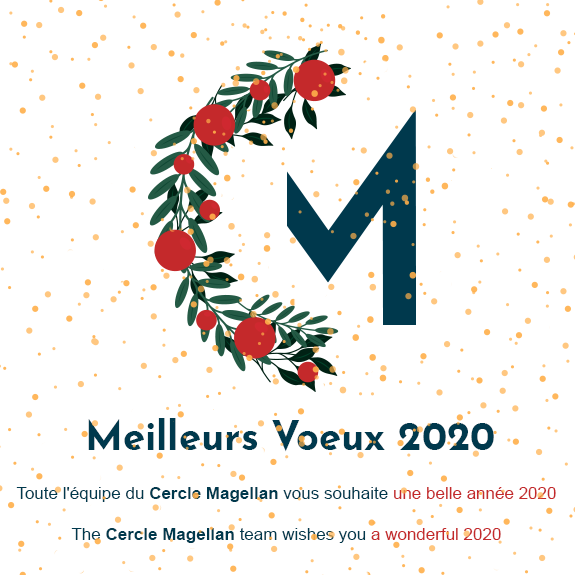
<style>
.page{position:relative;width:575px;height:575px;background:#ffffff}
.page>*{position:absolute;margin:0}
.t1{font:40px "JosefinSans-Bold";color:#00394d}
.t2{font:17px "ArialMT";color:#c4292b}
.t3{font:17px "ArialMT";color:#00394d}
.t4{font:17px "Arial-BoldMT";color:#00394d}
</style>
<div class="page">
<p class="t1" style="left:88px;top:418px;width:406px;height:34px">Meilleurs Voeux 2020</p>
<p class="t2" style="left:16px;top:487px;width:540px;height:56px;text-align:center"><span class="t3">Toute l'équipe du </span><span class="t4">Cercle Magellan</span><span class="t3"> vous souhaite </span>une belle année 2020<br><br><span class="t3">The </span><span class="t4">Cercle Magellan</span><span class="t3"> team wishes you </span>a wonderful 2020</p>
</div>
